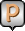
<style>
.page{position:relative;width:25px;height:31px}
.page>*{position:absolute;margin:0}
.t1{font:24px "MaiandraGD-Regular";color:#e8ac76;font-weight:bold}
.t2{font:24px "MaiandraGD-Regular";font-weight:bold}
</style>
<div class="page">
<p class="t1" style="left:6px;top:3px;width:13px;height:19px">p</p>
<p class="t2" style="left:7px;top:4px;width:13px;height:19px">p</p>
</div>
